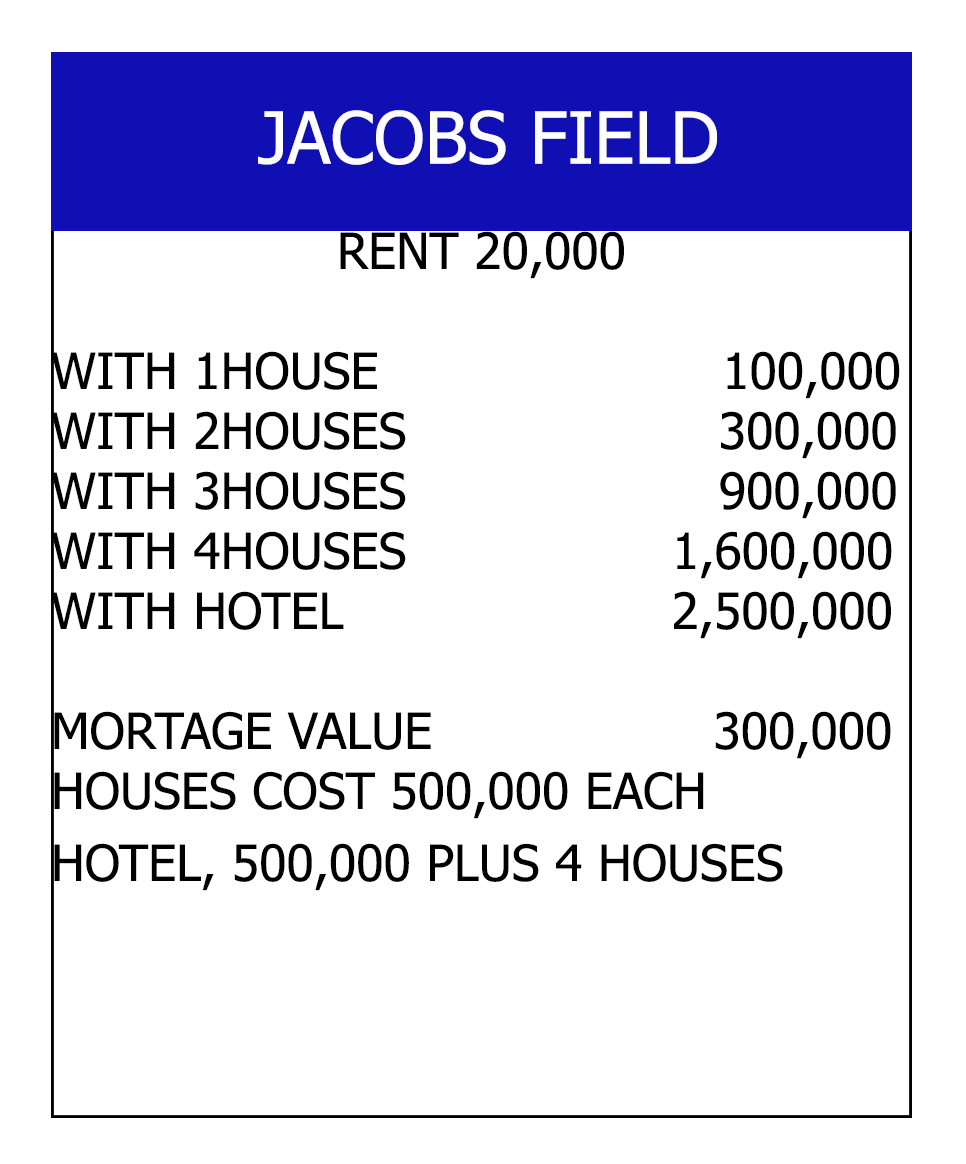
<style>
.page{position:relative;width:966px;height:1164px;background:#ffffff}
.page>*{position:absolute;margin:0}
.t1{font:72px "Tahoma";color:#fffefe}
.t2{font:50px "Tahoma";color:#010000}
</style>
<div class="page">
<p class="t1" style="left:258px;top:110px;width:459px;height:55px">JACOBS FIELD</p>
<p class="t2" style="left:51px;top:231px;width:849px;height:660px;text-align:center">RENT 20,000<br><br>WITH 1HOUSE                      100,000<br>WITH 2HOUSES                    300,000<br>WITH 3HOUSES                    900,000<br>WITH 4HOUSES                 1,600,000<br>WITH HOTEL                     2,500,000<br><br>MORTAGE VALUE                  300,000<br>HOUSES COST 500,000 EACH<br>HOTEL, 500,000 PLUS 4 HOUSES</p>
</div>
